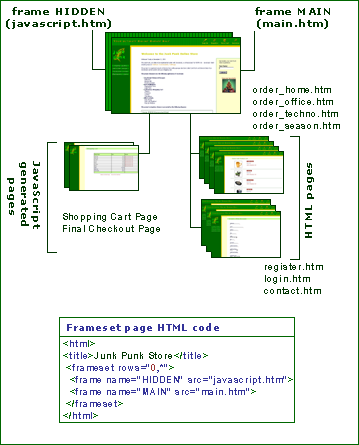
<style>
.page{position:relative;width:359px;height:445px;background:#ffffff}
.page>*{position:absolute;margin:0}
.t1{font:10px "Verdana-Bold";letter-spacing:0.1em;color:#003300}
.t2{font:10px "ArialNarrow-Bold";letter-spacing:0.1em;color:#003300}
.t3{font:9px "Verdana-Bold";letter-spacing:0.1em;color:#333399}
.t4{font:10px "ArialNarrow-Bold";letter-spacing:0.1em;color:#333399}
.t5{font:10px "ArialNarrow-Bold";letter-spacing:0.1em;color:#006600}
.t6{font:10px "ArialNarrow-Bold";letter-spacing:0.1em;color:#993333}
</style>
<div class="page">
<p class="t1" style="left:235px;top:2px;width:117px;height:30px;text-align:center">frame MAIN<br>(main.htm)</p>
<p class="t1" style="left:6px;top:7px;width:105px;height:22px;text-align:center">frame HIDDEN<br>(javascript.htm)</p>
<p class="t2" style="left:253px;top:86px;width:87px;height:45px">order_home.htm<br>order_office.htm<br>order_techno.htm<br>order_season.htm</p>
<p class="t1" style="left:7px;top:161px;width:33px;height:68px;text-align:center;rotate:90deg">JavaScript<br>generated<br> pages</p>
<p class="t1" style="left:305px;top:163px;width:9px;height:75px;rotate:-90deg">HTML pages</p>
<p class="t2" style="left:63px;top:213px;width:97px;height:21px">Shopping Cart Page<br>Final Checkout Page</p>
<p class="t2" style="left:264px;top:263px;width:59px;height:31px">register.htm<br>login.htm<br>contact.htm</p>
<p class="t3" style="left:67px;top:323px;width:152px;height:10px">Frameset page HTML code</p>
<p class="t4" style="left:43px;top:333px;width:271px;height:92px"><span class="t5">&lt;</span>htm<span class="t5">l&gt;<br>&lt;</span>title<span class="t5">&gt;</span><span class="t2">Junk Punk Store</span><span class="t5">&lt;/</span>title<span class="t5">&gt;<br> &lt;</span>frameset rows="<span class="t6">0</span>,*"<span class="t5">&gt;<br>  &lt;</span>frame name="HIDDEN" src="javascript.htm"<span class="t5">&gt;<br>  &lt;</span>frame name="MAIN" src="main.htm"<span class="t5">&gt;<br> &lt;/</span>frameset<span class="t5">&gt;<br>&lt;/</span>html<span class="t5">&gt;</span></p>
</div>
